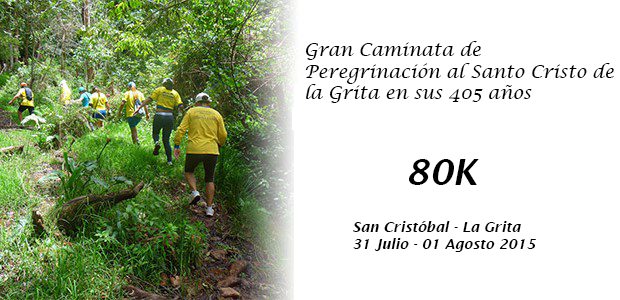
<style>
.page{position:relative;width:620px;height:300px;background:#ffffff}
.page>*{position:absolute;margin:0}
.t1{font:18px "LucidaCalligraphy-Italic";color:#000000}
.t2{font:36px "LucidaSans-DemiItalic";color:#000000}
.t3{font:14px "LucidaSans-DemiItalic";color:#000000}
</style>
<div class="page">
<p class="t1" style="left:305px;top:41px;width:309px;height:62px">Gran Caminata de<br>Peregrinación al Santo Cristo de <br>la Grita en sus 405 años</p>
<p class="t2" style="left:409px;top:159px;width:70px;height:26px">80K</p>
<p class="t3" style="left:353px;top:221px;width:183px;height:31px">San Cristóbal - La Grita <br>31 Julio - 01 Agosto 2015</p>
</div>
